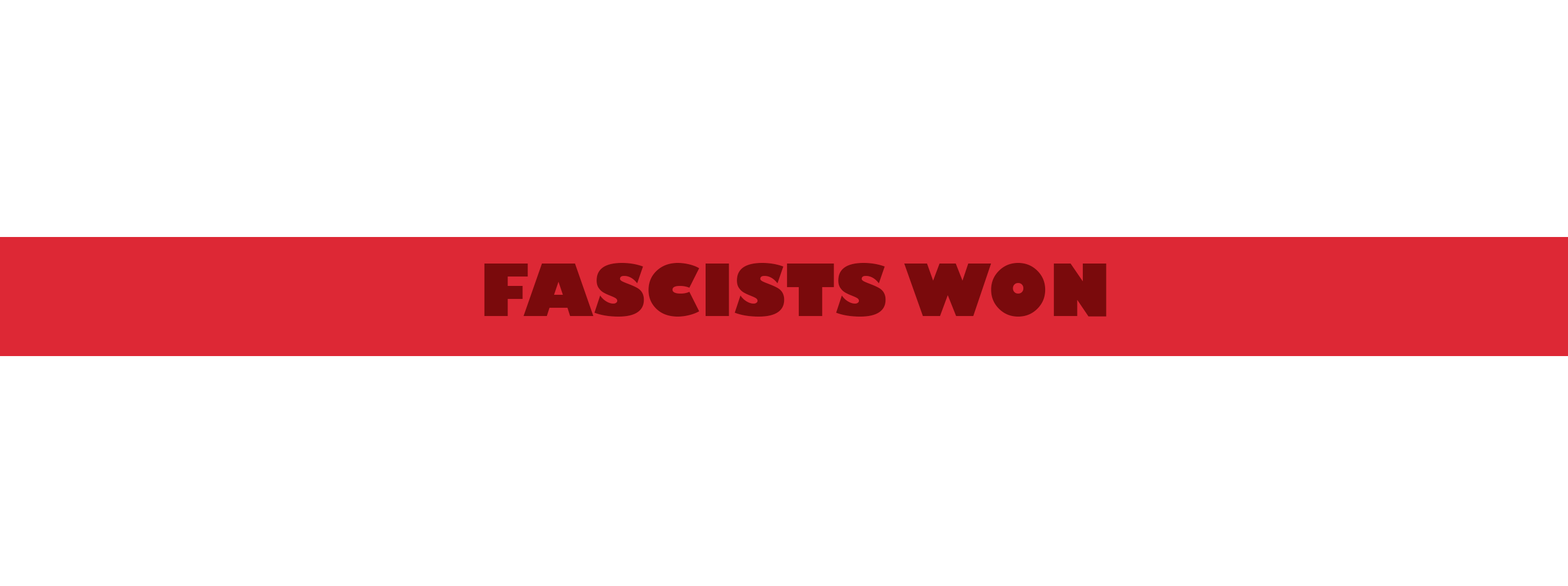
<style>
.page{position:relative;width:1568px;height:586px;background:#ffffff}
.page>*{position:absolute;margin:0}
.t1{font:70.7px "GillSans-UltraBold";color:#7a0a0c}
</style>
<div class="page">
<p class="t1" style="left:484px;top:263px;width:622px;height:54px">FASCISTS WON</p>
</div>
